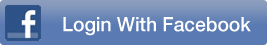
<style>
.page{position:relative;width:267px;height:45px;background:#597ab2}
.page>*{position:absolute;margin:0}
.t1{font:20px "HelveticaNeue-Medium";color:#ffffff;scale:0.96 1}
</style>
<div class="page">
<p class="t1" style="left:63px;top:17px;width:188px;height:19px">Login With Facebook</p>
</div>
